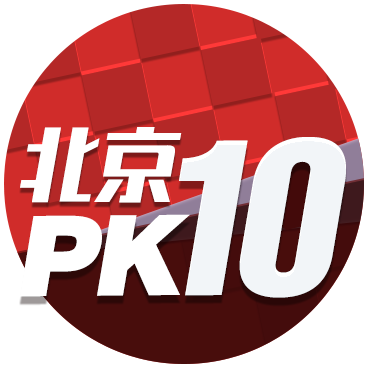
<style>
.page{position:relative;width:368px;height:368px;background:#ffffff}
.page>*{position:absolute;margin:0}
.t1{font:80px "RuixianSunHeiHeavyGB1.0";letter-spacing:-0.025em;color:#ffffff;font-style:italic}
.t2{font:216.5px "HelveticaLTStd-Comp";letter-spacing:-0.1em;color:#f2f5f8;font-style:italic}
.t3{font:111.2px "Swiss721BT-Black";letter-spacing:-0.05em;color:#ffffff;font-style:italic}
</style>
<div class="page">
<p class="t1" style="left:20px;top:127px;width:162px;height:76px">北京</p>
<p class="t2" style="left:179px;top:137px;width:167px;height:161px">10</p>
<p class="t3" style="left:20px;top:214px;width:170px;height:83px">PK</p>
</div>
